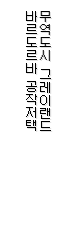
<style>
.page{position:relative;width:64px;height:240px;background:#ffffff}
.page>*{position:absolute;margin:0}
.t1{font:12px/13px "Galmuri11-Regular";color:#000000}
</style>
<div class="page">
<p class="t1" style="left:25px;top:11px;width:13px;height:63px;text-align:center">바<br>르<br>도<br>르<br>바</p>
<p class="t1" style="left:39px;top:11px;width:12px;height:50px;text-align:center">무<br>역<br>도<br>시</p>
<p class="t1" style="left:39px;top:69px;width:13px;height:63px;text-align:center">그<br>레<br>이<br>랜<br>드</p>
<p class="t1" style="left:25px;top:81px;width:13px;height:50px;text-align:center">공<br>작<br>저<br>택</p>
</div>
